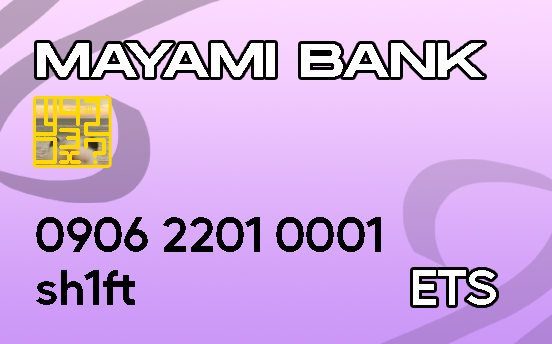
<style>
.page{position:relative;width:552px;height:344px}
.page>*{position:absolute;margin:0}
.t1{font:48px "MonumentExtended-Regular";color:#ffffff}
.t2{font:48px "MusticaPro-SemiBold";color:#000000}
.t3{font:48px "MusticaPro-SemiBold";color:#ffffff}
</style>
<div class="page">
<p class="t1" style="left:37px;top:43px;width:447px;height:34px">MAYAMI BANK</p>
<p class="t2" style="left:36px;top:217px;width:345px;height:35px">0906 2201 0001</p>
<p class="t2" style="left:36px;top:270px;width:99px;height:35px">sh1ft</p>
<p class="t3" style="left:413px;top:270px;width:83px;height:35px">ETS</p>
</div>
